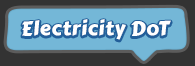
<style>
.page{position:relative;width:195px;height:66px;background:#74b7d7}
.page>*{position:absolute;margin:0}
.t1{font:20px "CarterOne";letter-spacing:0.025em;color:#ffffff}
</style>
<div class="page">
<p class="t1" style="left:22px;top:19px;width:149px;height:21px">Electricity DoT</p>
</div>
